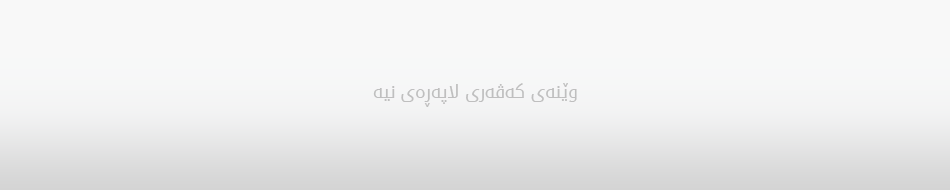
<style>
.page{position:relative;width:950px;height:190px;background:#f8f8f8}
.page>*{position:absolute;margin:0}
.t1{font:17.7px "DroidArabicKufi";color:#cccccc}
</style>
<div class="page">
<p class="t1" style="left:373px;top:83px;width:204px;height:24px">وێنەی کەڤەری لاپەڕەی نیە</p>
</div>
